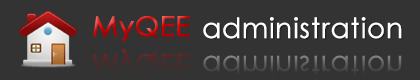
<style>
.page{position:relative;width:420px;height:80px;background:#333333}
.page>*{position:absolute;margin:0}
.t1{font:28px "CenturyGothic";font-weight:bold}
.t2{font:28px "CenturyGothic";color:#ffffff;font-weight:bold}
.t3{font:28px "CenturyGothic";color:#482c2c;font-weight:bold}
</style>
<div class="page">
<p class="t1" style="left:93px;top:16px;width:97px;height:26px">MyQEE</p>
<p class="t2" style="left:203px;top:17px;width:199px;height:22px">administration</p>
<p class="t3" style="left:93px;top:49px;width:97px;height:26px">MyQEE</p>
<p class="t1" style="left:203px;top:55px;width:199px;height:22px">administration</p>
</div>
